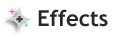
<style>
.page{position:relative;width:121px;height:37px;background:#ffffff}
.page>*{position:absolute;margin:0}
.t1{font:22px "TrebuchetMS-Bold";color:#282828}
</style>
<div class="page">
<p class="t1" style="left:38px;top:9px;width:70px;height:18px">Effects</p>
</div>
